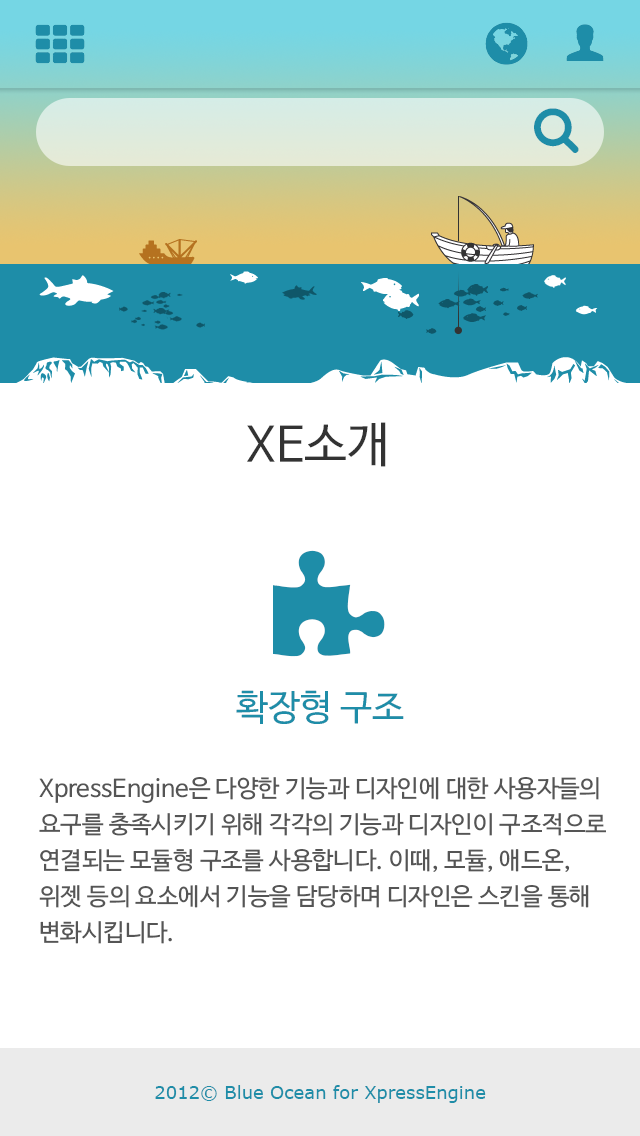
<style>
.page{position:relative;width:640px;height:1136px;background:#ffffff}
.page>*{position:absolute;margin:0}
.t1{font:48px "NanumBarunGothicOTF";color:#333333}
.t2{font:36px "NanumBarunGothicOTF";color:#1e8da8}
.t3{font:24px/36px "NanumBarunGothicOTF";color:#555555}
.t4{font:18px "Verdana";color:#1e8da8}
</style>
<div class="page">
<p class="t1" style="left:247px;top:422px;width:139px;height:45px">XE소개</p>
<p class="t2" style="left:236px;top:690px;width:168px;height:34px">확장형 구조</p>
<p class="t3" style="left:39px;top:777px;width:567px;height:167px">XpressEngine은 다양한 기능과 디자인에 대한 사용자들의 요구를 충족시키기 위해 각각의 기능과 디자인이 구조적으로 연결되는 모듈형 구조를 사용합니다. 이때, 모듈, 애드온, 위젯 등의 요소에서 기능을 담당하며 디자인은 스킨을 통해 변화시킵니다.</p>
<p class="t4" style="left:155px;top:1085px;width:331px;height:18px">2012© Blue Ocean for XpressEngine</p>
</div>
